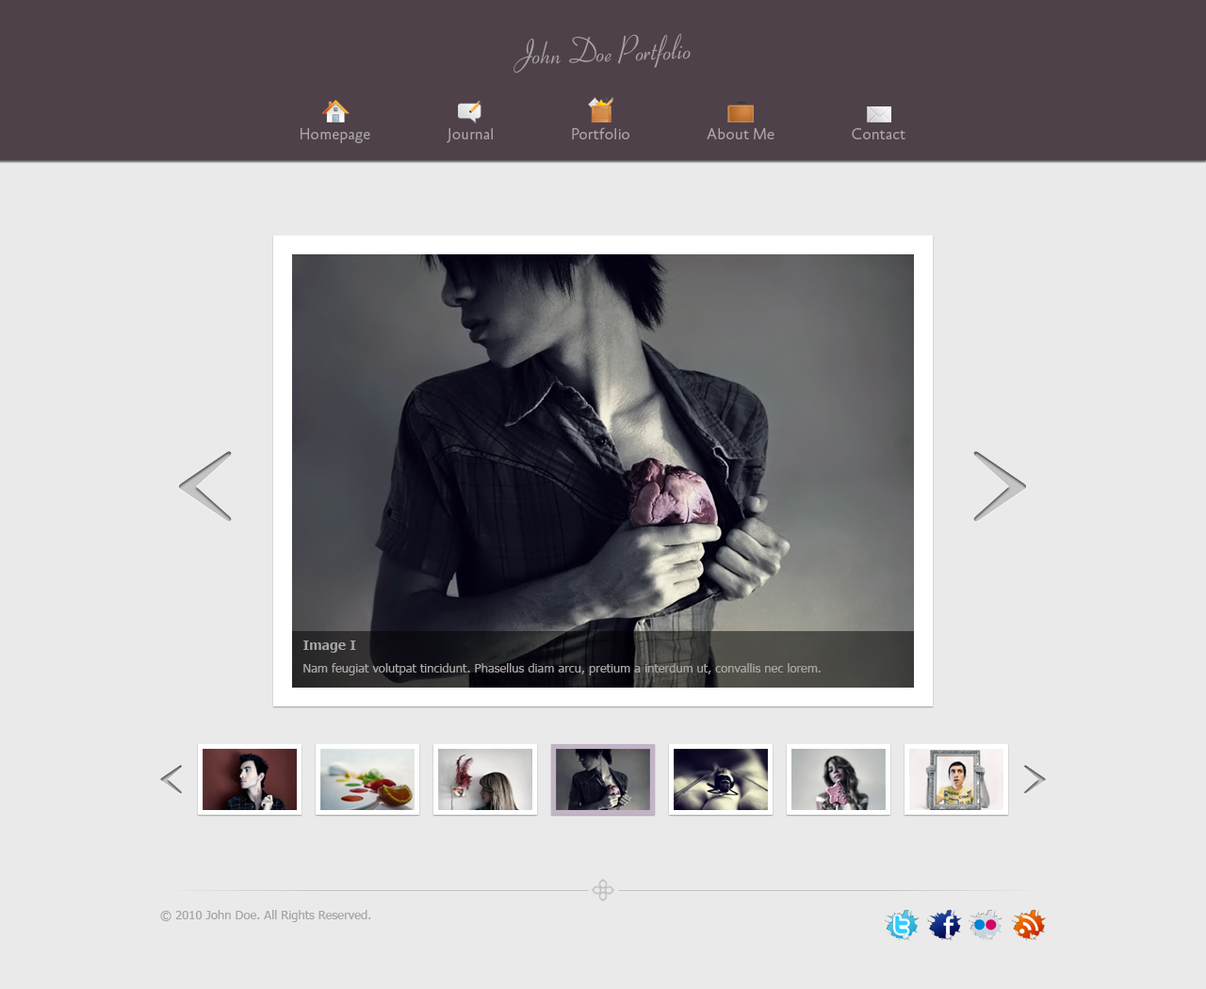
<style>
.page{position:relative;width:1206px;height:989px;background:#ebeaea}
.page>*{position:absolute;margin:0}
.t1{font:34.9px "Ribbon131BT-Regular";color:#a9a5a5}
.t2{font:16px "AbsaraSans-Light";color:#a9a5a5}
.t3{font:13.2px "Tahoma-Bold";color:#a9a5a5}
.t4{font:12.2px "Tahoma";color:#a9a5a5}
.t5{font:12.2px "Tahoma";color:#a9a5a4}
</style>
<div class="page">
<p class="t1" style="left:513px;top:33px;width:177px;height:40px;rotate:-2deg">John Doe Portfolio</p>
<p class="t2" style="left:300px;top:127px;width:605px;height:16px">Homepage                    Journal                    Portfolio                    About Me                    Contact</p>
<p class="t3" style="left:303px;top:641px;width:53px;height:12px">Image I</p>
<p class="t4" style="left:303px;top:663px;width:517px;height:12px">Nam feugiat volutpat tincidunt. Phasellus diam arcu, pretium a interdum ut, convallis nec lorem.</p>
<p class="t5" style="left:160px;top:910px;width:211px;height:12px">© 2010 John Doe. All Rights Reserved.</p>
</div>
